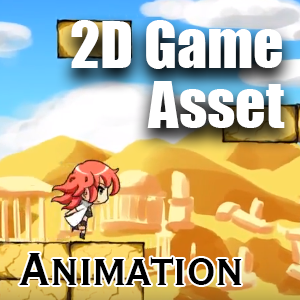
<style>
.page{position:relative;width:300px;height:300px}
.page>*{position:absolute;margin:0}
.t1{font:60px/60px "Impact";color:#ffffff}
.t2{font:60px "CopperplateGothicBT-BoldCond";color:#000000}
</style>
<div class="page">
<p class="t1" style="left:71px;top:20px;width:214px;height:108px;text-align:right">2D Game Asset</p>
<p class="t2" style="left:19px;top:253px;width:223px;height:32px">Animation</p>
</div>
